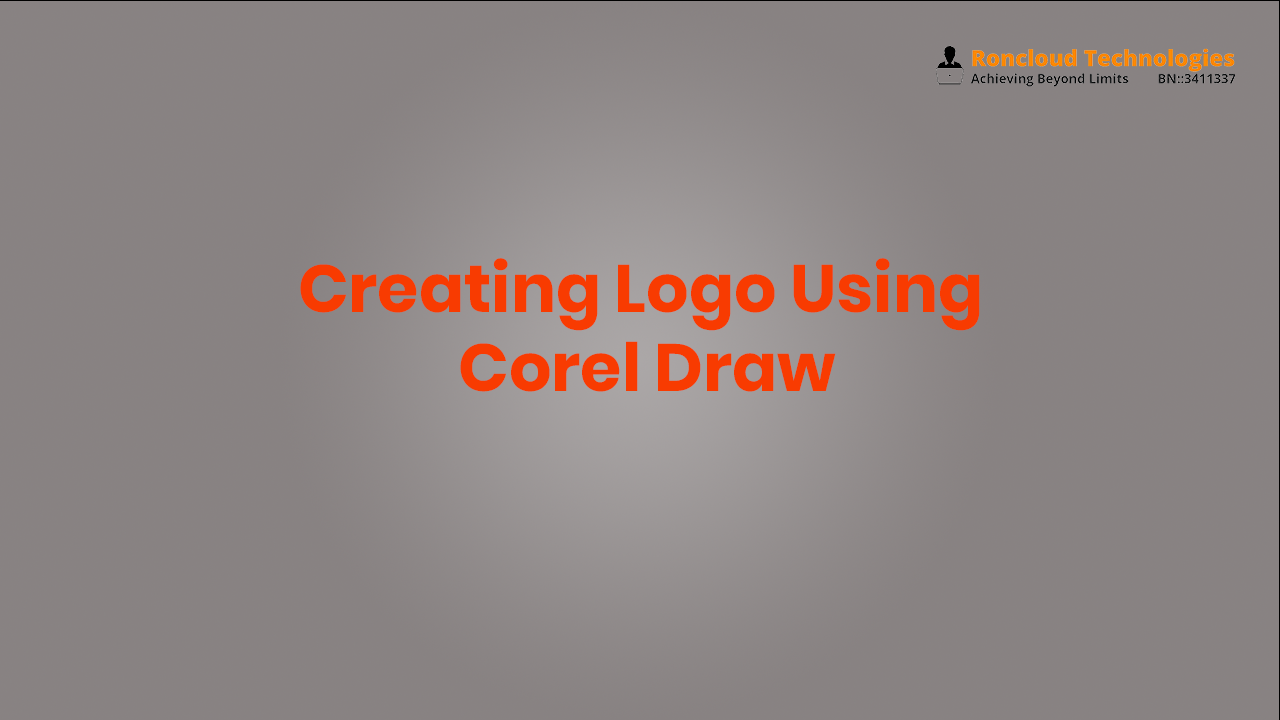
<style>
.page{position:relative;width:1280px;height:720px;background:#888282}
.page>*{position:absolute;margin:0}
.t1{font:66.7px "Poppins-Bold";color:#f83b01}
</style>
<div class="page">
<p class="t1" style="left:300px;top:258px;width:680px;height:134px;text-align:center">Creating Logo Using <br>Corel Draw</p>
</div>
